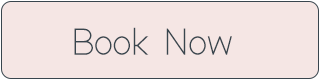
<style>
.page{position:relative;width:320px;height:80px;background:#f5e6e4}
.page>*{position:absolute;margin:0}
.t1{font:38.5px "ModernSansLight";letter-spacing:-0.02em;color:#39464e;scale:0.96 1}
</style>
<div class="page">
<p class="t1" style="left:74px;top:27px;width:158px;height:28px">Book Now</p>
</div>
